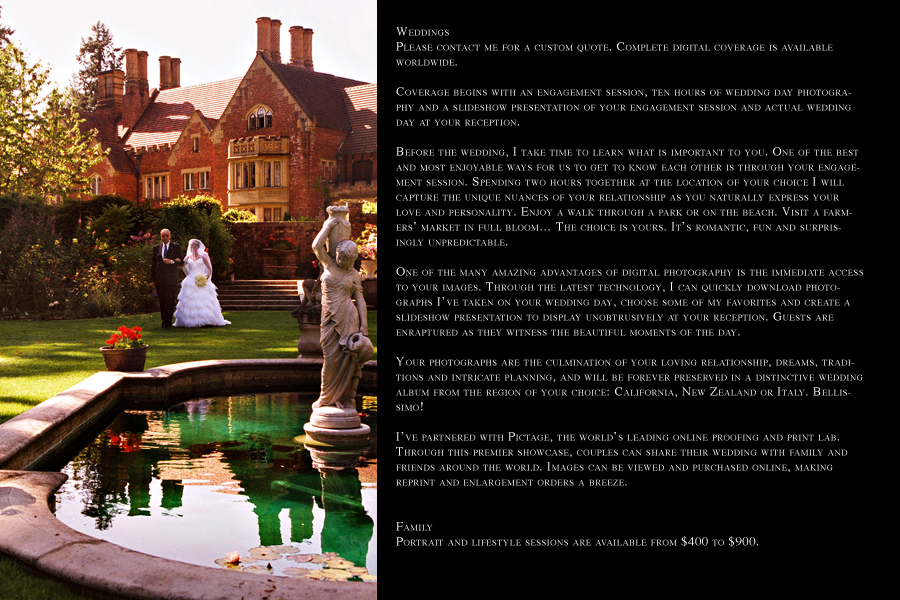
<style>
.page{position:relative;width:900px;height:600px;background:#000000}
.page>*{position:absolute;margin:0}
.t1{font:12.5px "Times-Roman";letter-spacing:0.05em;color:#ffffff;font-variant:small-caps}
</style>
<div class="page">
<p class="t1" style="left:396px;top:27px;width:468px;height:520px">Weddings<br>Please contact me for a custom quote. Complete digital coverage is available worldwide. <br><br>Coverage begins with an engagement session, ten hours of wedding day photography and a slideshow presentation of your engagement session and actual wedding day at your reception.<br><br>Before the wedding, I take time to learn what is important to you. One of the best and most enjoyable ways for us to get to know each other is through your engagement session. Spending two hours together at the location of your choice I will capture the unique nuances of your relationship as you naturally express your love and personality. Enjoy a walk through a park or on the beach. Visit a farmers’ market in full bloom… The choice is yours. It’s romantic, fun and surprisingly unpredictable. <br><br>One of the many amazing advantages of digital photography is the immediate access to your images. Through the latest technology, I can quickly download photographs I’ve taken on your wedding day, choose some of my favorites and create a slideshow presentation to display unobtrusively at your reception. Guests are enraptured as they witness the beautiful moments of the day. <br><br>Your photographs are the culmination of your loving relationship, dreams, traditions and intricate planning, and will be forever preserved in a distinctive wedding album from the region of your choice: California, New Zealand or Italy. Bellissimo! <br><br>I’ve partnered with Pictage, the world’s leading online proofing and print lab. Through this premier showcase, couples can share their wedding with family and friends around the world. Images can be viewed and purchased online, making reprint and enlargement orders a breeze. <br><br><br>Family<br>Portrait and lifestyle sessions are available from $400 to $900.</p>
</div>
